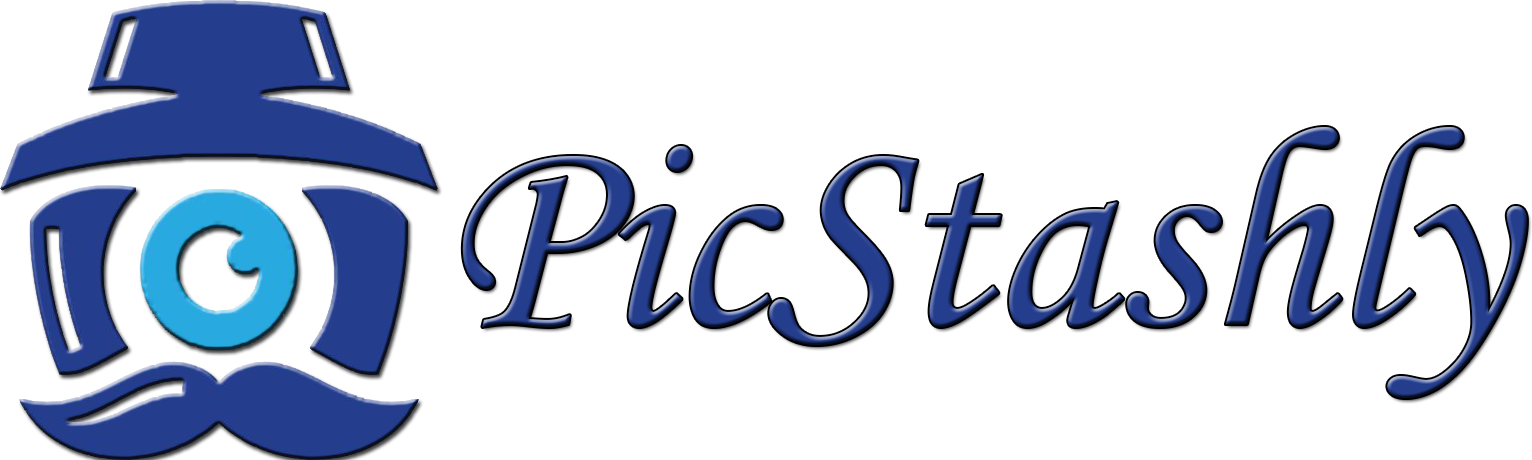
<style>
.page{position:relative;width:1532px;height:460px;background:#ffffff}
.page>*{position:absolute;margin:0}
.t1{font:287.5px "MonotypeCorsiva";color:#243d8d}
</style>
<div class="page">
<p class="t1" style="left:462px;top:127px;width:1065px;height:271px">PicStashly</p>
</div>
